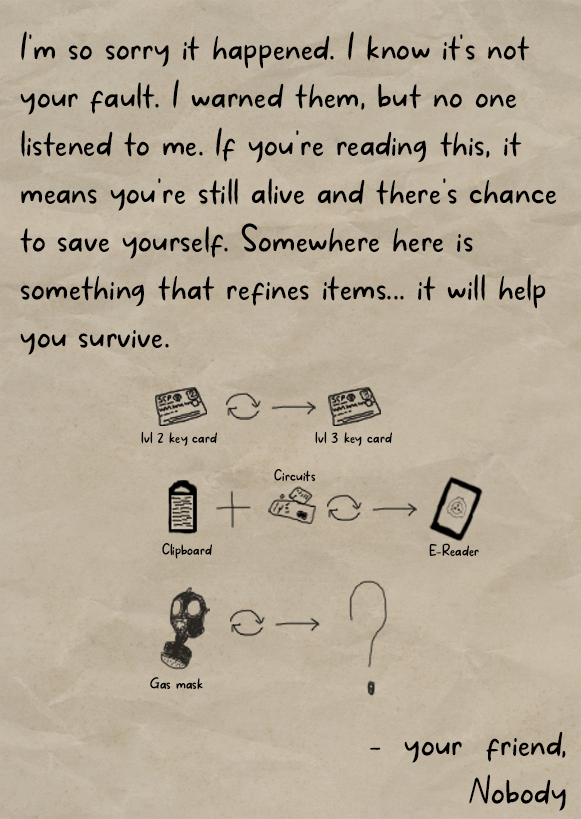
<style>
.page{position:relative;width:581px;height:819px}
.page>*{position:absolute;margin:0}
.t1{font:40px "MakanHatiCyrillicRegular";letter-spacing:0.01em;color:#000000}
.t2{font:40px/69.4px "MakanHatiCyrillicRegular";letter-spacing:0.01em;color:#000000}
.t3{font:17.4px "MakanHatiCyrillicRegular";letter-spacing:0.01em;color:#000000}
</style>
<div class="page">
<p class="t1" style="left:20px;top:31px;width:537px;height:324px;text-align:justify"><span class="t2"><br></span>I'm so sorry it happened. I know it's not your fault. I warned them, but no one listened to me. If you're reading this, it means you're still alive and there's chance to save yourself. Somewhere here is something that refines items... it will help you survive.</p>
<p class="t3" style="left:141px;top:431px;width:76px;height:15px">lvl 2 key card</p>
<p class="t3" style="left:315px;top:431px;width:77px;height:15px">lvl 3 key card</p>
<p class="t3" style="left:274px;top:469px;width:42px;height:13px">Circuits</p>
<p class="t3" style="left:162px;top:543px;width:50px;height:16px">Clipboard</p>
<p class="t3" style="left:429px;top:543px;width:50px;height:14px">E-Reader</p>
<p class="t3" style="left:150px;top:677px;width:53px;height:13px">Gas mask</p>
<p class="t1" style="left:370px;top:731px;width:196px;height:80px;text-align:justify">- your friend, Nobody</p>
</div>
